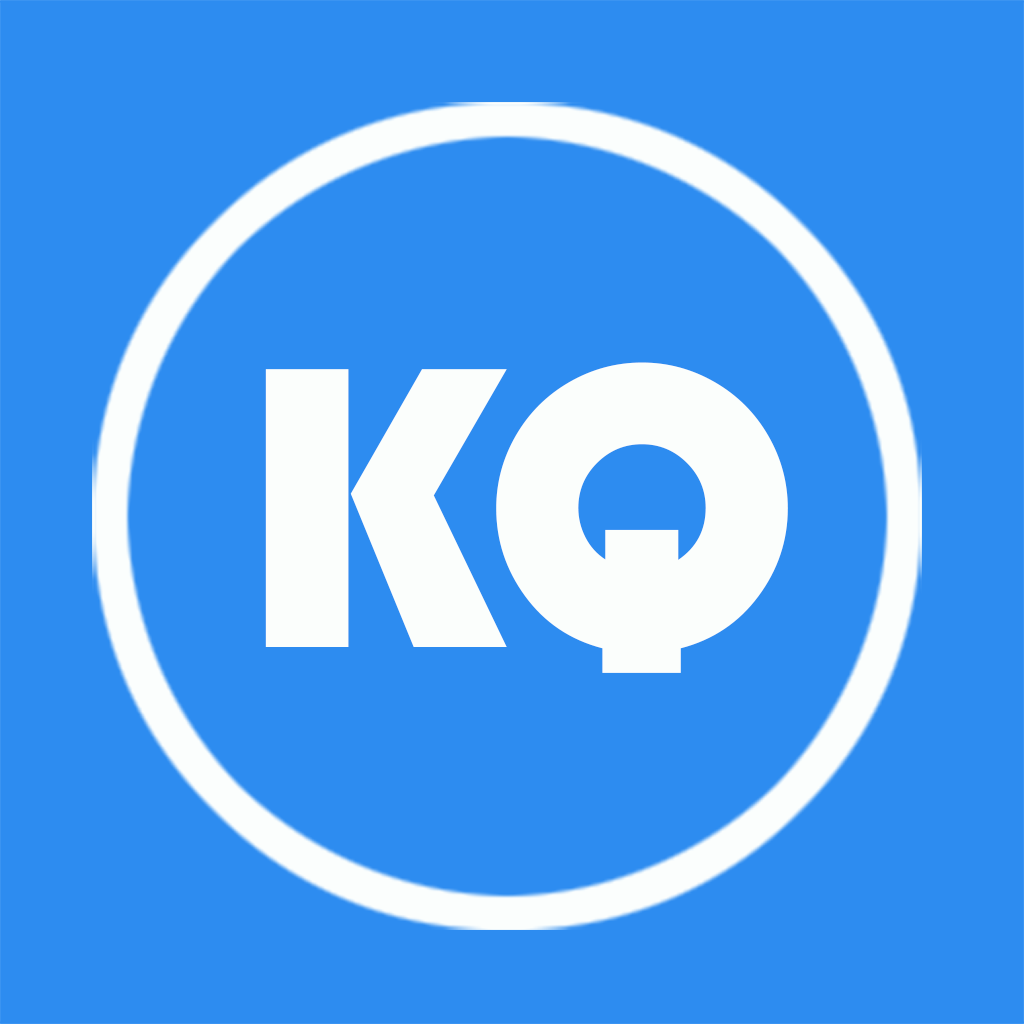
<style>
.page{position:relative;width:1024px;height:1024px;background:#2d8cf0}
.page>*{position:absolute;margin:0}
.t1{font:416.5px "STHupo";letter-spacing:-0.05em;color:#fbfefc}
</style>
<div class="page">
<p class="t1" style="left:265px;top:362px;width:523px;height:311px">KQ</p>
</div>
